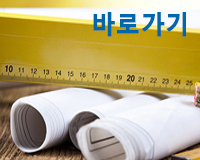
<style>
.page{position:relative;width:200px;height:160px}
.page>*{position:absolute;margin:0}
.t1{font:26.4px "MalgunGothicBold";color:#0066ad;font-weight:bold;scale:0.91 1}
</style>
<div class="page">
<p class="t1" style="left:93px;top:12px;width:93px;height:25px">바로가기</p>
</div>
